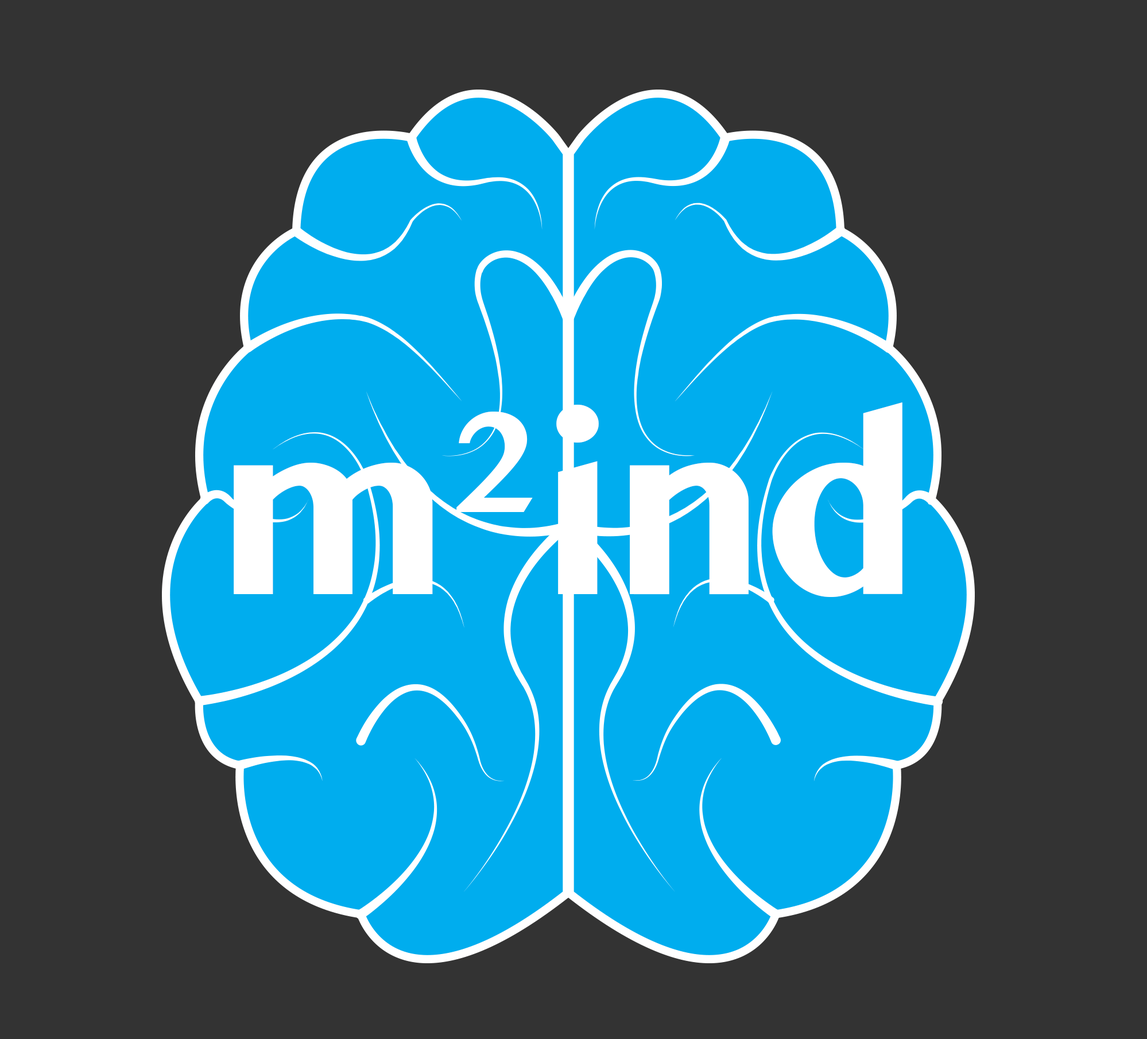
<style>
.page{position:relative;width:1147px;height:1039px;background:#333333}
.page>*{position:absolute;margin:0}
.t1{font:246.4px "OriyaMN-Bold";color:#ffffff}
</style>
<div class="page">
<p class="t1" style="left:234px;top:403px;width:669px;height:194px">m2ind</p>
</div>
